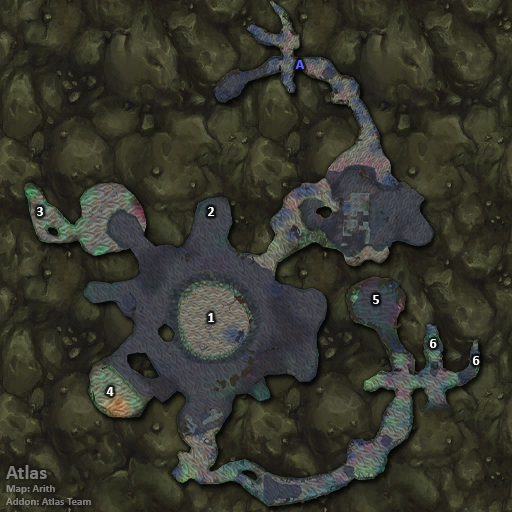
<style>
.page{position:relative;width:512px;height:512px}
.page>*{position:absolute;margin:0}
.t1{font:14px "Calibri-Bold";color:#6666ff}
.t2{font:14px "Calibri-Bold";color:#ffffff}
.t3{font:11px "Calibri-Bold";color:#7f7f7c}
.t4{font:20px "Calibri-Bold";color:#7f7f7c}
</style>
<div class="page">
<p class="t1" style="left:295px;top:60px;width:9px;height:9px">A</p>
<p class="t2" style="left:37px;top:207px;width:6px;height:9px">3</p>
<p class="t2" style="left:208px;top:207px;width:7px;height:9px">2</p>
<p class="t2" style="left:373px;top:295px;width:6px;height:9px">5</p>
<p class="t2" style="left:208px;top:313px;width:6px;height:9px">1</p>
<p class="t2" style="left:430px;top:339px;width:7px;height:9px">6</p>
<p class="t2" style="left:473px;top:356px;width:7px;height:9px">6</p>
<p class="t2" style="left:106px;top:387px;width:8px;height:9px">4</p>
<p class="t3" style="left:6px;top:465px;width:85px;height:40px"><span class="t4">Atlas<br></span>Map: Arith<br>Addon: Atlas Team</p>
</div>
